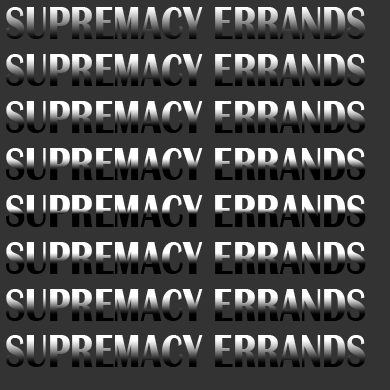
<style>
.page{position:relative;width:390px;height:390px;background:#333333}
.page>*{position:absolute;margin:0}
.t1{font:48.2px "BritannicBold";scale:0.77 1}
</style>
<div class="page">
<p class="t1" style="left:6px;top:7px;width:360px;height:32px">SUPREMACY ERRANDS</p>
<p class="t1" style="left:6px;top:54px;width:360px;height:32px">SUPREMACY ERRANDS</p>
<p class="t1" style="left:6px;top:101px;width:360px;height:32px">SUPREMACY ERRANDS</p>
<p class="t1" style="left:6px;top:148px;width:360px;height:32px">SUPREMACY ERRANDS</p>
<p class="t1" style="left:6px;top:195px;width:360px;height:32px">SUPREMACY ERRANDS</p>
<p class="t1" style="left:6px;top:242px;width:360px;height:32px">SUPREMACY ERRANDS</p>
<p class="t1" style="left:6px;top:289px;width:360px;height:32px">SUPREMACY ERRANDS</p>
<p class="t1" style="left:6px;top:335px;width:360px;height:32px">SUPREMACY ERRANDS</p>
</div>
